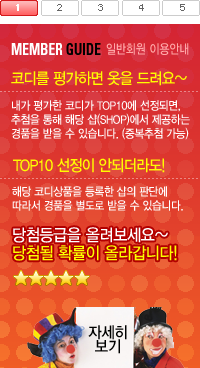
<style>
.page{position:relative;width:200px;height:368px}
.page>*{position:absolute;margin:0}
.t1{font:11px "morris9";color:#ffffff;font-weight:bold}
.t2{font:11px "morris9";color:#656565}
.t3{font:16.5px "Univeconbol";color:#ffffff;text-transform:uppercase;scale:0.82 1}
.t4{font:16.5px "Univeconbol";color:#000000;text-transform:uppercase;scale:0.82 1}
.t5{font:13.2px "YDIYGO330";color:#ffa7a7;text-transform:uppercase;scale:0.82 1}
.t6{font:15.9px "YDIYGO330";letter-spacing:-0.05em;color:#fffc00;scale:0.91 1}
.t7{font:11.7px/14px "YDIYGO330";letter-spacing:-0.025em;color:#ffffff;scale:0.91 1}
.t8{font:17px/18px "YDIYGO330";letter-spacing:-0.025em;color:#fcff00;scale:0.91 1}
.t9{font:17px/18px "YDIYGO330";letter-spacing:-0.025em;color:#ffffff;scale:0.91 1}
.t10{font:15.9px/14px "YDIYGO330";color:#000000;scale:0.91 1}
</style>
<div class="page">
<p class="t1" style="left:16px;top:4px;width:3px;height:7px">1</p>
<p class="t2" style="left:57px;top:4px;width:5px;height:7px">2</p>
<p class="t2" style="left:98px;top:4px;width:5px;height:7px">3</p>
<p class="t2" style="left:139px;top:4px;width:5px;height:7px">4</p>
<p class="t2" style="left:180px;top:4px;width:5px;height:7px">5</p>
<p class="t3" style="left:11px;top:43px;width:90px;height:12px">MEMBER <span class="t4">GUIDE</span></p>
<p class="t5" style="left:106px;top:43px;width:83px;height:12px">일반회원 이용안내</p>
<p class="t6" style="left:11px;top:71px;width:176px;height:15px">코디를 평가하면 옷을 드려요~</p>
<p class="t7" style="left:11px;top:100px;width:179px;height:40px">내가 평가한 코디가 TOP10에 선정되면, <br>추첨을 통해 해당 샵(SHOP)에서 제공하는 <br>경품을 받을 수 있습니다. (중복추첨 가능)</p>
<p class="t6" style="left:13px;top:158px;width:152px;height:15px">TOP10 선정이 안되더라도!</p>
<p class="t7" style="left:12px;top:186px;width:171px;height:25px">해당 코디상품을 등록한 샵의 판단에 <br>따라서 경품을 별도로 받을 수 있습니다.</p>
<p class="t8" style="left:13px;top:227px;width:164px;height:34px"><span class="t9">당첨등급을 올려보세요~ <br></span>당첨될 확률이 올라갑니다!</p>
<p class="t10" style="left:88px;top:325px;width:39px;height:29px;text-align:center">자세히<br>보기</p>
</div>
